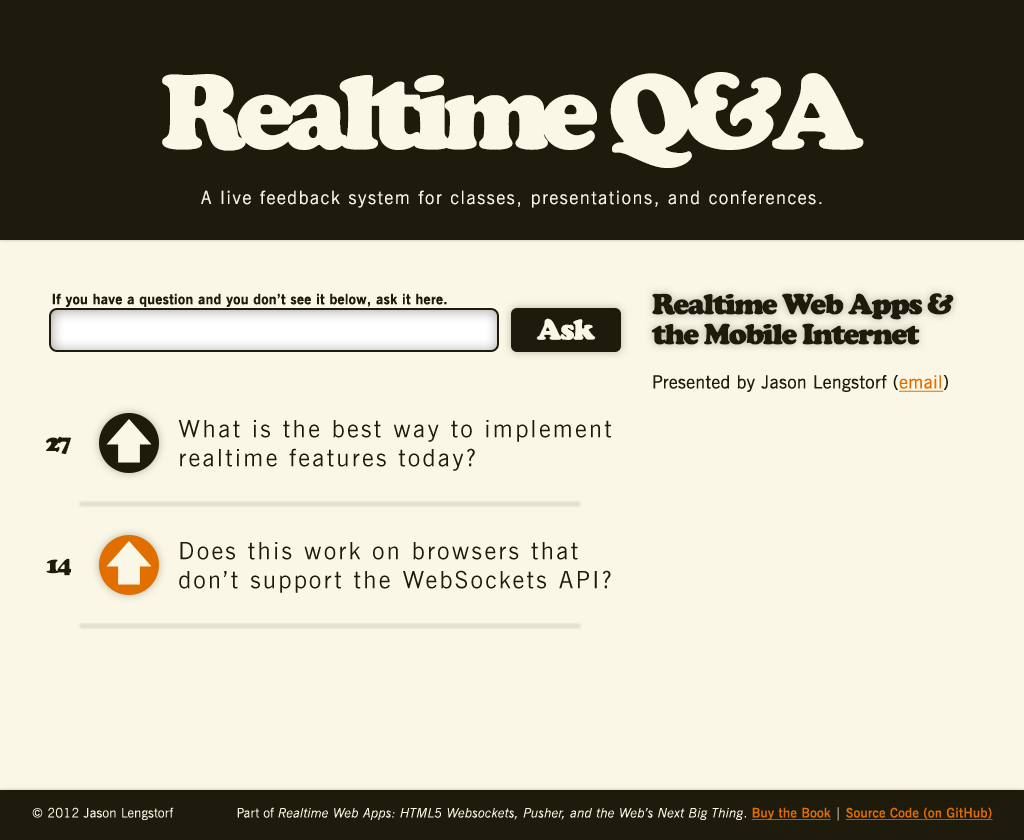
<style>
.page{position:relative;width:1024px;height:840px;background:#fbf7e7}
.page>*{position:absolute;margin:0}
.t1{font:110px "CooperBlack";letter-spacing:-0.08em;color:#fbf7e7}
.t2{font:18px "NewsGothicBT-Light";letter-spacing:0.1em;color:#fbf7e7}
.t3{font:14px "NewsGothicBT-Bold";letter-spacing:0.025em;color:#1f1b0c}
.t4{font:30px/30px "CooperBlack";letter-spacing:-0.05em;color:#1f1b0c}
.t5{font:30px "CooperBlack";letter-spacing:-0.05em;color:#fbf7e7}
.t6{font:18px "NewsGothicBT-Roman";letter-spacing:0.025em;color:#1f1b0c}
.t7{font:18px "NewsGothicBT-Roman";letter-spacing:0.025em;color:#e06f00;text-decoration:underline}
.t8{font:24px "NewsGothicBT-Roman";letter-spacing:0.1em;color:#1f1b0c}
.t9{font:24px "CooperBlack";letter-spacing:-0.1em;color:#1f1b0c}
.t10{font:13px "NewsGothicBT-LightItalic";letter-spacing:0.025em;color:#fbf7e7}
.t11{font:13px "NewsGothicBT-Light";letter-spacing:0.025em;color:#fbf7e7}
.t12{font:13px "NewsGothicBT-Demi";letter-spacing:0.025em;color:#e06f00;text-decoration:underline}
</style>
<div class="page">
<p class="t1" style="left:162px;top:72px;width:702px;height:96px">Realtime Q&amp;A</p>
<p class="t2" style="left:201px;top:190px;width:621px;height:18px">A live feedback system for classes, presentations, and conferences.</p>
<p class="t3" style="left:52px;top:293px;width:395px;height:14px">If you have a question and you don’t see it below, ask it here.</p>
<p class="t4" style="left:651px;top:293px;width:303px;height:52px">Realtime Web Apps &amp; the Mobile Internet</p>
<p class="t5" style="left:536px;top:318px;width:60px;height:22px">Ask</p>
<p class="t6" style="left:653px;top:375px;width:295px;height:17px">Presented by Jason Lengstorf (<span class="t7">email</span>)</p>
<p class="t8" style="left:178px;top:420px;width:434px;height:51px">What is the best way to implement realtime features today?</p>
<p class="t9" style="left:46px;top:436px;width:25px;height:18px">27</p>
<p class="t8" style="left:179px;top:542px;width:432px;height:51px">Does this work on browsers that don’t support the WebSockets API?</p>
<p class="t9" style="left:46px;top:558px;width:25px;height:18px">14</p>
<p class="t10" style="left:32px;top:807px;width:961px;height:14px"><span class="t11">© 2012 Jason Lengstorf Part of </span>Realtime Web Apps: HTML5 Websockets, Pusher, and the Web’s Next Big Thing<span class="t11">. </span><span class="t12">Buy the Book</span><span class="t11"> | </span><span class="t12">Source Code (on GitHub)</span></p>
</div>
